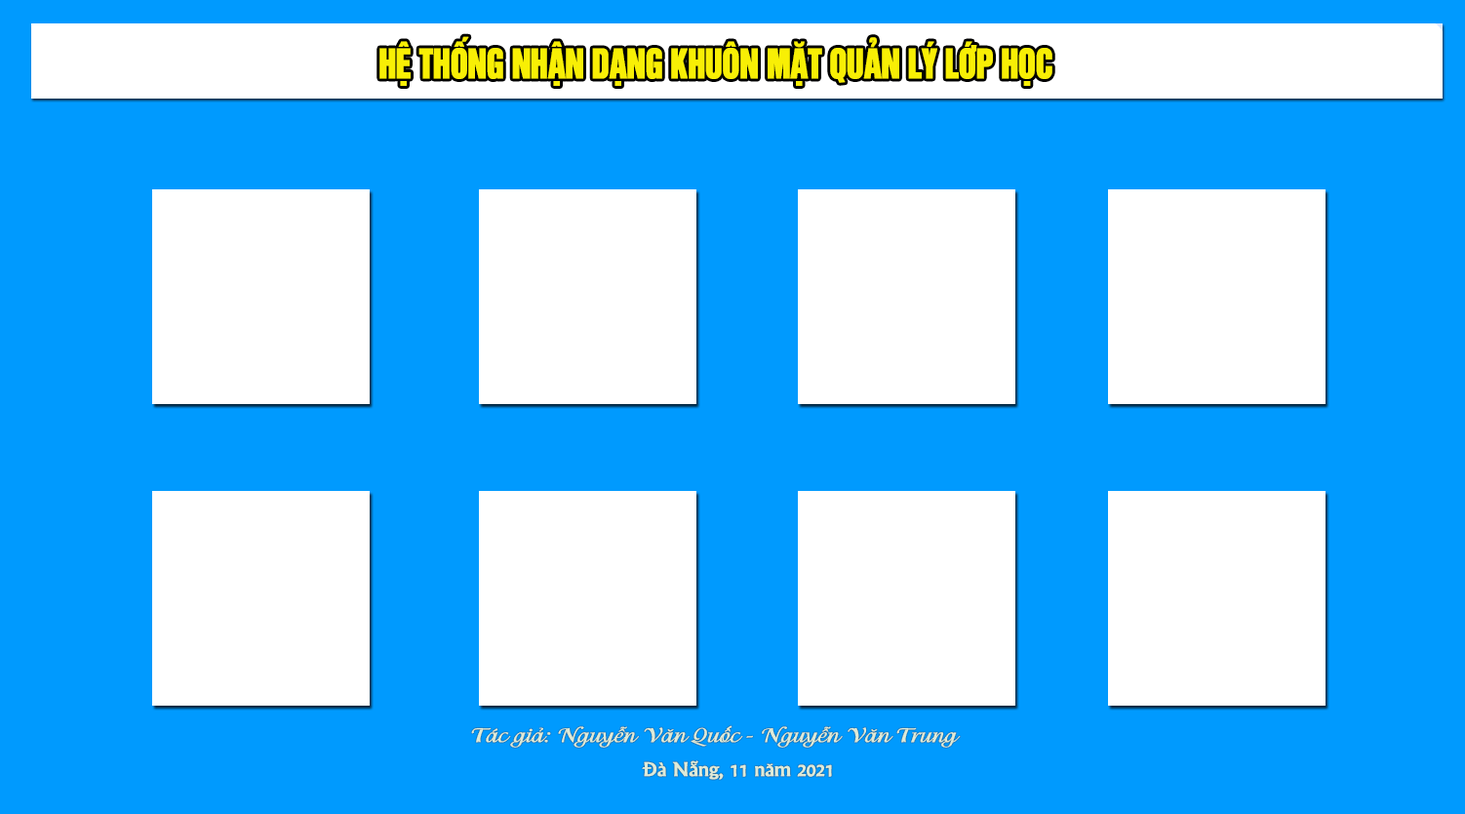
<style>
.page{position:relative;width:1465px;height:814px;background:#009afe}
.page>*{position:absolute;margin:0}
.t1{font:37.3px "UTM-HelvetIns";letter-spacing:-0.025em;color:#f8ef05;font-weight:bold;scale:0.83 1}
.t2{font:20.3px "UTM-Isadora";letter-spacing:-0.025em;color:#ddead9;font-weight:bold;scale:1.09 1}
.t3{font:20.3px "UTM-Khuccamta";letter-spacing:-0.025em;color:#ddead9;font-weight:bold;scale:1.09 1}
</style>
<div class="page">
<p class="t1" style="left:380px;top:36px;width:673px;height:50px">HỆ THỐNG NHẬN DẠNG KHUÔN MẶT QUẢN LÝ LỚP HỌC</p>
<p class="t2" style="left:471px;top:725px;width:490px;height:22px">Tác giả: Nguyễn Văn Quốc - Nguyễn Văn Trung</p>
<p class="t3" style="left:642px;top:760px;width:190px;height:20px">Đà Nẵng, 11 năm 2021</p>
</div>
